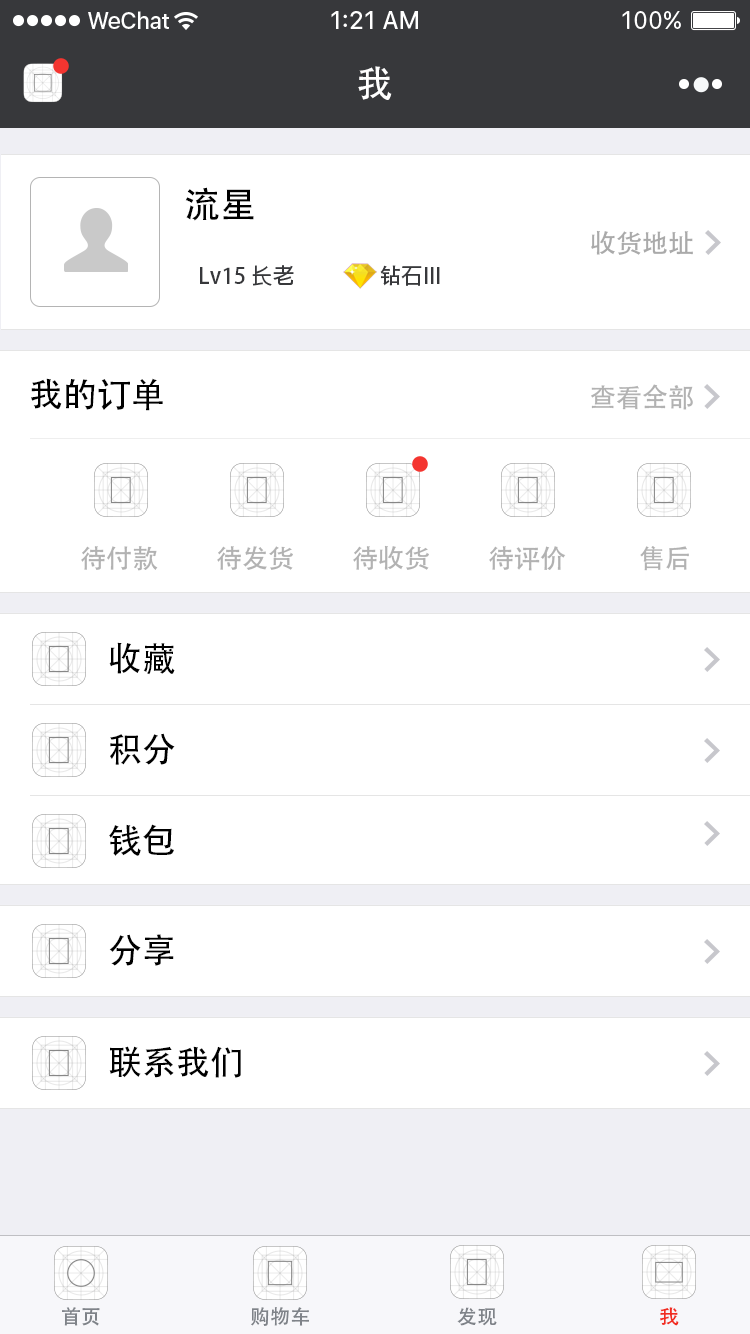
<style>
.page{position:relative;width:750px;height:1334px;background:#ffffff}
.page>*{position:absolute;margin:0}
.t1{font:37px "AdobeHeitiStd-Regular";color:#ffffff}
.t2{font:36px "AdobeHeitiStd-Regular";color:#000000}
.t3{font:26px "AdobeHeitiStd-Regular";color:#aaaaaa}
.t4{font:22px "AdobeHeitiStd-Regular";color:#37383b}
.t5{font:34px "AdobeHeitiStd-Regular";color:#000000}
.t6{font:26px "AdobeHeitiStd-Regular";color:#b2b2b2}
.t7{font:20px "AdobeHeitiStd-Regular";color:#7f8389}
.t8{font:20px "AdobeHeitiStd-Regular";color:#f12c20}
</style>
<div class="page">
<p class="t1" style="left:358px;top:66px;width:34px;height:34px">我</p>
<p class="t2" style="left:185px;top:187px;width:69px;height:34px">流星</p>
<p class="t3" style="left:591px;top:230px;width:102px;height:25px">收货地址</p>
<p class="t4" style="left:200px;top:265px;width:94px;height:21px">Lv15 长老</p>
<p class="t4" style="left:380px;top:265px;width:60px;height:21px">钻石III</p>
<p class="t5" style="left:31px;top:378px;width:132px;height:33px">我的订单</p>
<p class="t6" style="left:591px;top:384px;width:102px;height:26px">查看全部</p>
<p class="t6" style="left:353px;top:545px;width:76px;height:25px">待收货</p>
<p class="t6" style="left:81px;top:546px;width:77px;height:25px">待付款</p>
<p class="t6" style="left:217px;top:546px;width:76px;height:24px">待发货</p>
<p class="t6" style="left:489px;top:546px;width:77px;height:25px">待评价</p>
<p class="t6" style="left:640px;top:546px;width:49px;height:25px">售后</p>
<p class="t5" style="left:109px;top:642px;width:66px;height:33px">收藏</p>
<p class="t5" style="left:110px;top:733px;width:65px;height:32px">积分</p>
<p class="t5" style="left:109px;top:824px;width:65px;height:32px">钱包</p>
<p class="t5" style="left:109px;top:934px;width:65px;height:32px">分享</p>
<p class="t5" style="left:109px;top:1046px;width:132px;height:32px">联系我们</p>
<p class="t7" style="left:62px;top:1307px;width:38px;height:19px">首页</p>
<p class="t7" style="left:251px;top:1307px;width:58px;height:19px">购物车</p>
<p class="t7" style="left:457px;top:1307px;width:40px;height:19px">发现</p>
<p class="t8" style="left:660px;top:1307px;width:19px;height:19px">我</p>
</div>
